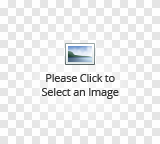
<style>
.page{position:relative;width:160px;height:144px;background:#fefefe}
.page>*{position:absolute;margin:0}
.t1{font:11px "OpenSans";letter-spacing:-0.02em;color:#333333}
</style>
<div class="page">
<p class="t1" style="left:41px;top:74px;width:78px;height:25px;text-align:center">Please Click to<br>Select an Image</p>
</div>
